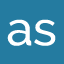
<style>
.page{position:relative;width:64px;height:64px;background:#247ba0}
.page>*{position:absolute;margin:0}
.t1{font:48px "Raleway-Medium";color:#ffffff}
</style>
<div class="page">
<p class="t1" style="left:7px;top:19px;width:49px;height:27px">as</p>
</div>
